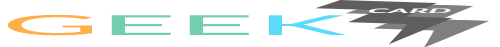
<style>
.page{position:relative;width:500px;height:47px;background:#ffffff}
.page>*{position:absolute;margin:0}
.t1{font:27.5px "Lato-Regular";color:#74cfae;scale:4.88 1}
.t2{font:27.5px "Lato-Regular";color:#ffaf47;scale:4.88 1}
.t3{font:27.5px "Lato-Regular";color:#58dcf8;scale:4.88 1}
.t4{font:5.9px "Lato-Bold";color:#ffffff;font-weight:bold;font-style:italic;scale:4.92 1}
</style>
<div class="page">
<p class="t1" style="left:8px;top:14px;width:338px;height:22px"><span class="t2">G</span>EE<span class="t3">K</span></p>
<p class="t4" style="left:369px;top:8px;width:82px;height:5px">CARD</p>
</div>
